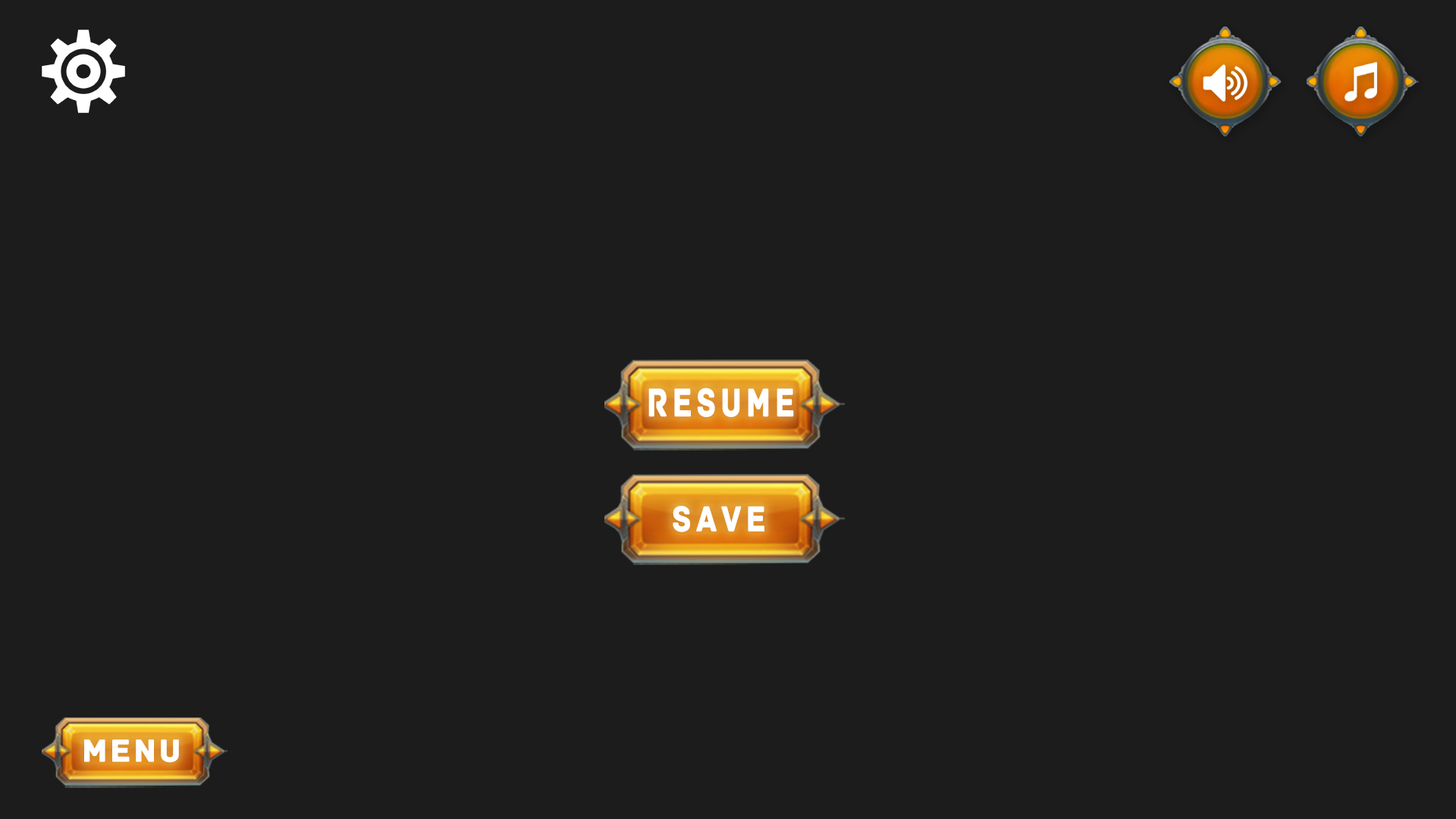
<style>
.page{position:relative;width:1456px;height:819px;background:#1c1c1c}
.page>*{position:absolute;margin:0}
.t1{font:41.8px "Archive";letter-spacing:0.12em;color:#ffffff;font-weight:bold;scale:0.76 1}
.t2{font:37.4px "Archive";letter-spacing:0.12em;color:#ffffff;font-weight:bold;scale:0.84 1}
.t3{font:33px "Archive";letter-spacing:0.06em;color:#ffffff;font-weight:bold}
</style>
<div class="page">
<p class="t1" style="left:648px;top:388px;width:146px;height:29px">RESUME</p>
<p class="t2" style="left:673px;top:506px;width:91px;height:26px">SAVE</p>
<p class="t3" style="left:84px;top:739px;width:95px;height:24px">MENU</p>
</div>
